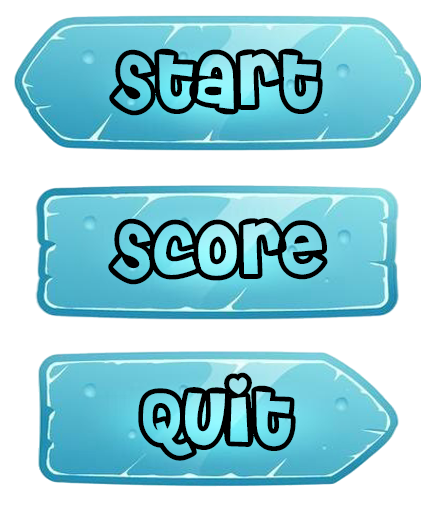
<style>
.page{position:relative;width:442px;height:509px;background:#ffffff}
.page>*{position:absolute;margin:0}
.t1{font:75px "CheriLiney";color:#000000}
</style>
<div class="page">
<p class="t1" style="left:109px;top:48px;width:214px;height:68px">Start</p>
<p class="t1" style="left:109px;top:48px;width:214px;height:68px">Start</p>
<p class="t1" style="left:108px;top:218px;width:220px;height:67px">Score</p>
<p class="t1" style="left:108px;top:218px;width:220px;height:67px">Score</p>
<p class="t1" style="left:138px;top:372px;width:158px;height:89px">Quit</p>
<p class="t1" style="left:138px;top:372px;width:158px;height:89px">Quit</p>
</div>
